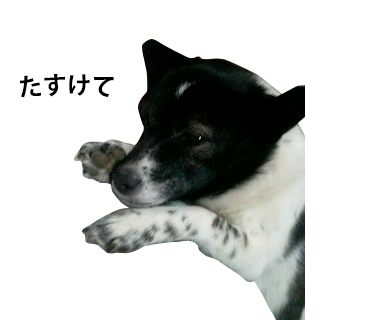
<style>
.page{position:relative;width:370px;height:320px;background:#ffffff}
.page>*{position:absolute;margin:0}
.t1{font:24px "KozGoPr6N-Bold";color:#000000}
</style>
<div class="page">
<p class="t1" style="left:19px;top:74px;width:95px;height:24px">たすけて</p>
</div>
